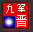
<style>
.page{position:relative;width:33px;height:32px;background:#f20000}
.page>*{position:absolute;margin:0}
.t1{font:10.4px "SimSun";color:#ffffff}
.t2{font:11.7px "SimSun";color:#ffffff}
</style>
<div class="page">
<p class="t1" style="left:6px;top:4px;width:19px;height:9px">九军</p>
<p class="t2" style="left:16px;top:15px;width:11px;height:12px">晋</p>
</div>
